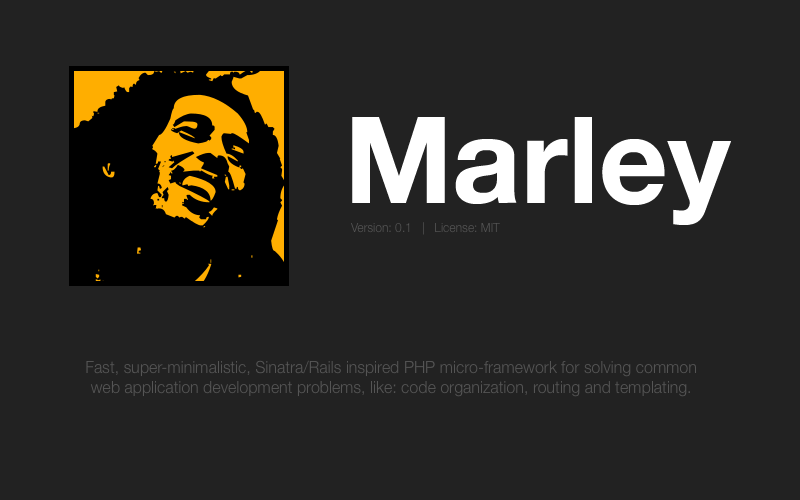
<style>
.page{position:relative;width:800px;height:500px;background:#222222}
.page>*{position:absolute;margin:0}
.t1{font:120px "HelveticaNeue-Bold";color:#ffffff}
.t2{font:12px "HelveticaNeue-Light";color:#555555}
.t3{font:16px "HelveticaNeue-Light";color:#555555}
</style>
<div class="page">
<p class="t1" style="left:352px;top:117px;width:379px;height:108px">Marley</p>
<p class="t2" style="left:351px;top:222px;width:149px;height:13px">Version: 0.1   |   License: MIT</p>
<p class="t3" style="left:86px;top:360px;width:610px;height:37px;text-align:center">Fast, super-minimalistic, Sinatra/Rails inspired PHP micro-framework for solving common web application development problems, like: code organization, routing and templating.</p>
</div>
